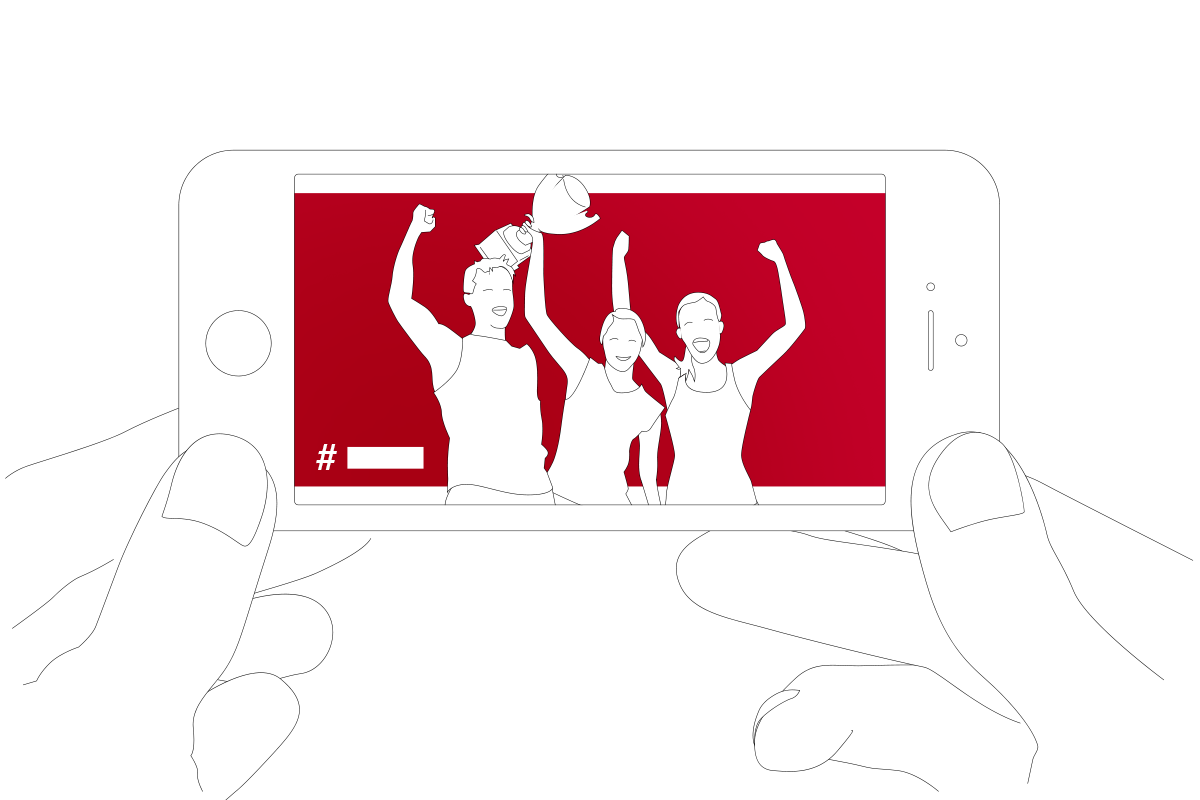
<style>
.page{position:relative;width:1200px;height:800px;background:#ffffff}
.page>*{position:absolute;margin:0}
.t1{font:44.8px "PTSans-Regular";letter-spacing:-0.04em;color:#ffffff;text-transform:uppercase}
</style>
<div class="page">
<p class="t1" style="left:316px;top:444px;width:21px;height:26px">#</p>
</div>
